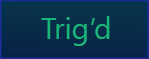
<style>
.page{position:relative;width:149px;height:59px}
.page>*{position:absolute;margin:0}
.t1{font:30px "SegoeUISymbol";color:#19b579}
</style>
<div class="page">
<p class="t1" style="left:41px;top:16px;width:69px;height:30px">Trig’d</p>
</div>
